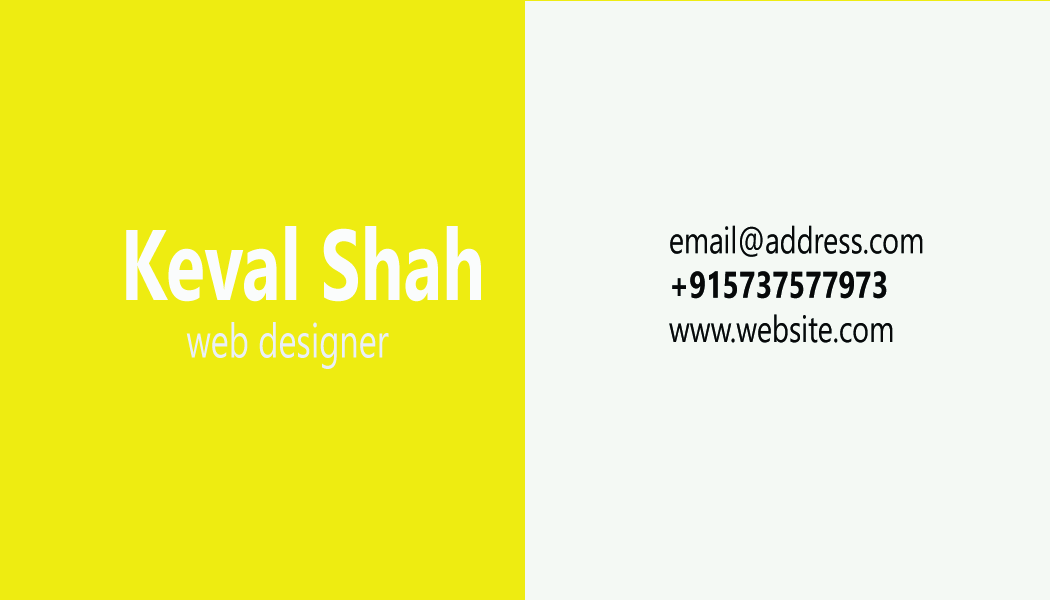
<style>
.page{position:relative;width:1050px;height:600px;background:#f4f9f4}
.page>*{position:absolute;margin:0}
.t1{font:48px "NirmalaUI";color:#e9eff8;scale:0.71 1}
.t2{font:100px "NirmalaUI-Bold";color:#fafcfc;scale:0.71 1}
.t3{font:36.9px "NirmalaUI";color:#070909;scale:0.78 1}
.t4{font:36.9px "NirmalaUI-Bold";color:#070909;scale:0.78 1}
</style>
<div class="page">
<p class="t1" style="left:126px;top:226px;width:355px;height:143px"><span class="t2">Keval Shah<br></span>       web designer</p>
<p class="t3" style="left:669px;top:225px;width:254px;height:118px">email@address.com<br><span class="t4">+915737577973<br></span>www.website.com</p>
</div>
